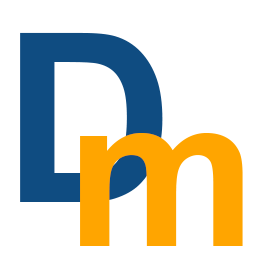
<style>
.page{position:relative;width:256px;height:256px;background:#ffffff}
.page>*{position:absolute;margin:0}
.t1{font:235.7px "Arial-BoldMT";color:#0f4c81}
.t2{font:212.3px "Arial-BoldMT";color:#ffa600}
</style>
<div class="page">
<p class="t1" style="left:20px;top:32px;width:143px;height:170px">D</p>
<p class="t2" style="left:80px;top:133px;width:163px;height:113px">m</p>
</div>
